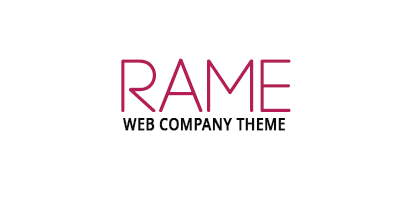
<style>
.page{position:relative;width:400px;height:200px;background:#ffffff}
.page>*{position:absolute;margin:0}
.t1{font:72px "Code-Light";letter-spacing:0.01em;color:#b41d56;text-transform:uppercase;font-weight:bold}
.t2{font:16.7px "OpenSans-Semibold";color:#0c0a0a;font-weight:bold;scale:0.85 1}
</style>
<div class="page">
<p class="t1" style="left:121px;top:58px;width:170px;height:54px">rame</p>
<p class="t2" style="left:123px;top:118px;width:162px;height:13px">WEB COMPANY THEME</p>
</div>
